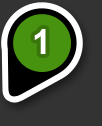
<style>
.page{position:relative;width:102px;height:126px;background:#333333}
.page>*{position:absolute;margin:0}
.t1{font:34.5px "Arial-BoldMT";color:#ffffff}
</style>
<div class="page">
<p class="t1" style="left:34px;top:29px;width:12px;height:25px">1</p>
</div>
